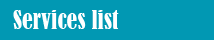
<style>
.page{position:relative;width:214px;height:40px;background:#0198b3}
.page>*{position:absolute;margin:0}
.t1{font:24px "BernardMT-Condensed";color:#ffffff}
</style>
<div class="page">
<p class="t1" style="left:13px;top:10px;width:106px;height:19px">Services list</p>
</div>
